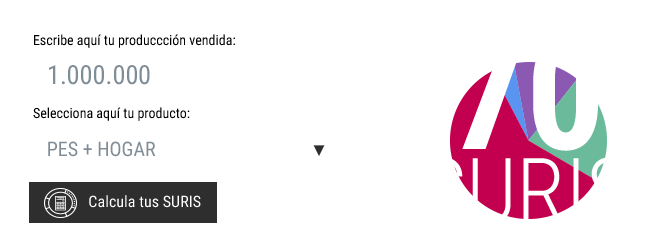
<style>
.page{position:relative;width:646px;height:246px;background:#ffffff}
.page>*{position:absolute;margin:0}
.t1{font:14px "RobotoCondensed-Regular";color:#000000}
.t2{font:156.5px "RobotoCondensed-Bold";letter-spacing:-0.007em;color:#ffffff;text-transform:uppercase}
.t3{font:26.2px "RobotoCondensed-Regular";color:#7a8e99}
.t4{font:20px "RobotoCondensed-Regular";color:#7a8e99;text-transform:uppercase}
.t5{font:15.5px "ArialMT";color:#2e2e2e}
.t6{font:89.7px "RobotoCondensed-Light";letter-spacing:-0.007em;color:#ffffff;text-transform:uppercase}
.t7{font:15.9px "RobotoCondensed-Regular";color:#ffffff}
.t8{font:15.9px "RobotoCondensed-Regular";color:#ffffff;text-transform:uppercase}
</style>
<div class="page">
<p class="t1" style="left:34px;top:34px;width:201px;height:14px">Escribe aquí tu produccción vendida:</p>
<p class="t2" style="left:453px;top:36px;width:145px;height:115px">70</p>
<p class="t3" style="left:49px;top:65px;width:101px;height:20px">1.000.000</p>
<p class="t1" style="left:33px;top:107px;width:157px;height:14px">Selecciona aquí tu producto:</p>
<p class="t4" style="left:48px;top:141px;width:108px;height:16px">pes + hogar</p>
<p class="t5" style="left:313px;top:145px;width:12px;height:11px;rotate:90deg">►</p>
<p class="t6" style="left:424px;top:157px;width:205px;height:66px">suris</p>
<p class="t7" style="left:89px;top:195px;width:112px;height:13px"><span class="t8">C</span>alcula tus SURIS</p>
</div>
